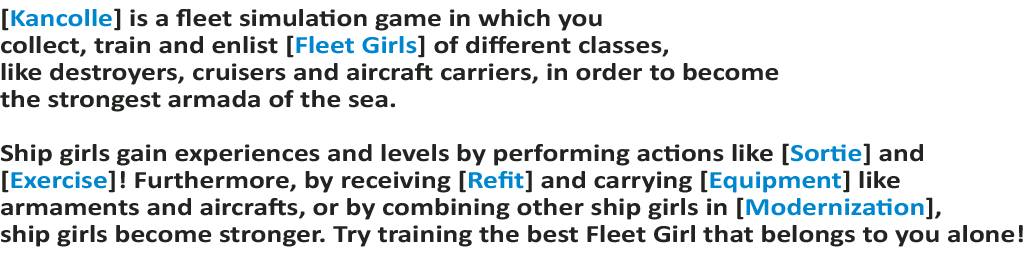
<style>
.page{position:relative;width:1024px;height:256px;background:#ffffff}
.page>*{position:absolute;margin:0}
.t1{font:25px/27px "Calibri-Bold";color:#212421;scale:1.18 1}
.t2{font:25px/27px "Calibri-Bold";color:#0086ce;scale:1.18 1}
</style>
<div class="page">
<p class="t1" style="left:0px;top:8px;width:1023px;height:239px">[<span class="t2">Kancolle</span>] is a fleet simulation game in which you <br>collect, train and enlist [<span class="t2">Fleet Girls</span>] of different classes, <br>like destroyers, cruisers and aircraft carriers, in order to become <br>the strongest armada of the sea.<br> <br>Ship girls gain experiences and levels by performing actions like [<span class="t2">Sortie</span>] and<br>[<span class="t2">Exercise</span>]! Furthermore, by receiving [<span class="t2">Refit</span>] and carrying [<span class="t2">Equipment</span>] like<br>armaments and aircrafts, or by combining other ship girls in [<span class="t2">Modernization</span>], <br>ship girls become stronger. Try training the best Fleet Girl that belongs to you alone!</p>
</div>
